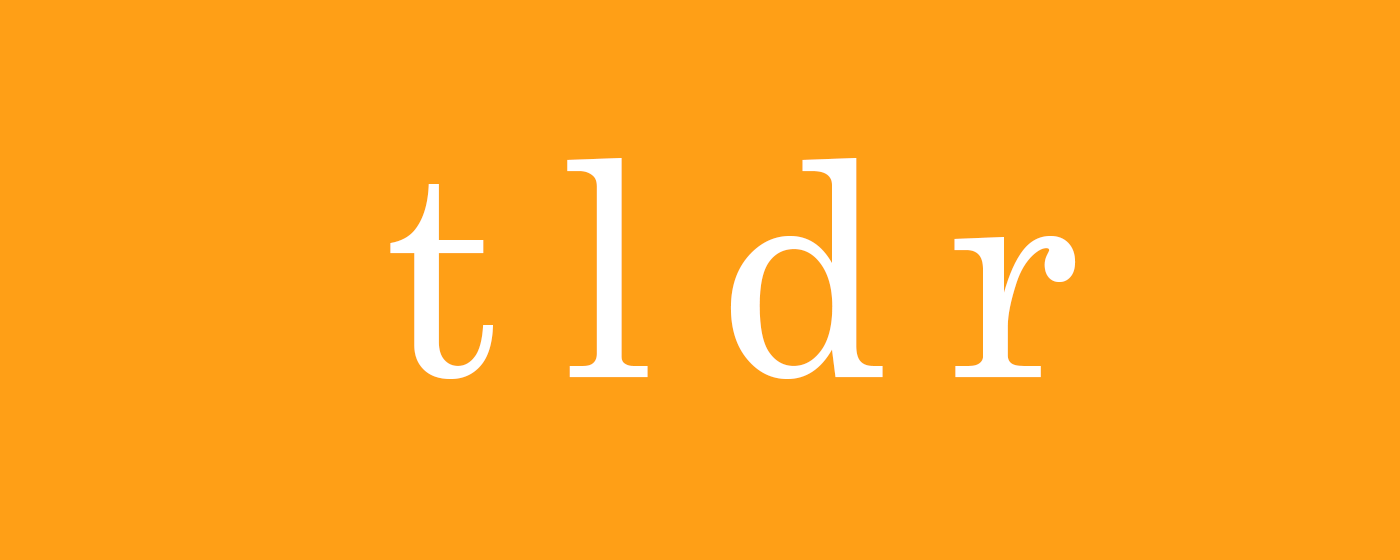
<style>
.page{position:relative;width:1400px;height:560px;background:#ff9f16}
.page>*{position:absolute;margin:0}
.t1{font:300px "CenturySchoolbook";letter-spacing:0.2em;color:#ffffff}
</style>
<div class="page">
<p class="t1" style="left:390px;top:158px;width:686px;height:221px">tldr</p>
</div>
